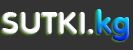
<style>
.page{position:relative;width:133px;height:50px;background:#333333}
.page>*{position:absolute;margin:0}
.t1{font:33.1px "VAGRundschriftD"}
</style>
<div class="page">
<p class="t1" style="left:1px;top:9px;width:128px;height:32px">SUTKI.kg</p>
</div>
